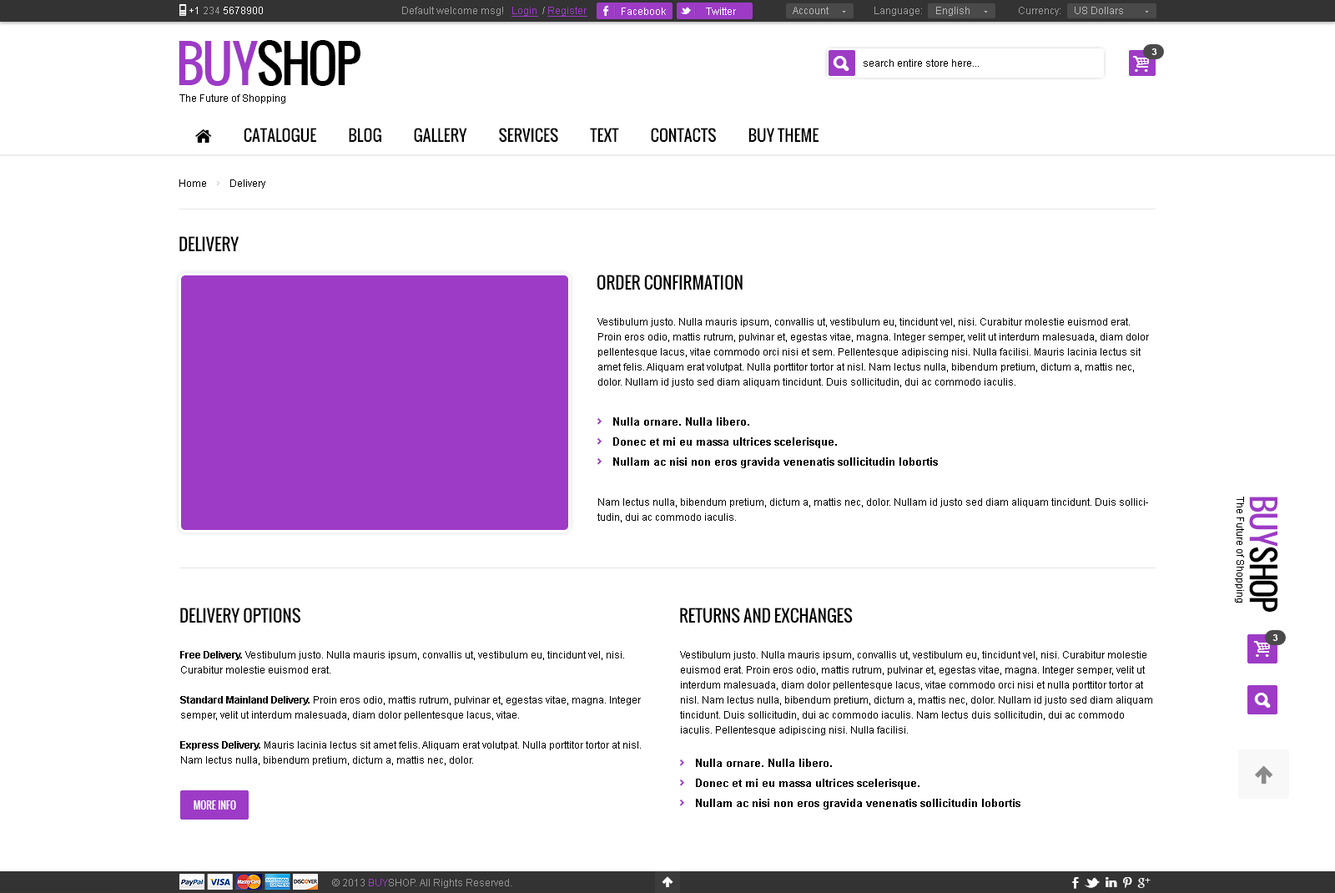
<style>
.page{position:relative;width:1335px;height:893px;background:#ffffff}
.page>*{position:absolute;margin:0}
.t1{font:10px "ArialMT";color:#ffffff}
.t2{font:10px "ArialMT";color:#9b9b9b}
.t3{font:10px "ArialMT";color:#9d3bc6;text-decoration:underline}
.t4{font:10px "ArialMT";color:#b6b6b6}
.t5{font:50.1px "Oswald";letter-spacing:-0.06em;color:#000000;text-transform:uppercase}
.t6{font:50.1px "Oswald";letter-spacing:-0.06em;color:#9d3bc6;text-transform:uppercase}
.t7{font:9.2px "Arial-BoldMT";color:#ffffff;text-transform:uppercase}
.t8{font:10px "ArialMT";color:#000000}
.t9{font:16.7px "Oswald";color:#000000;text-transform:uppercase}
.t10{font:10px/15px "ArialMT";color:#000000}
.t11{font:10.8px/20px "Arial-BoldMT";color:#000000}
.t12{font:31.7px "Oswald";letter-spacing:-0.06em;color:#000000;text-transform:uppercase}
.t13{font:31.7px "Oswald";letter-spacing:-0.06em;color:#9d3bc6;text-transform:uppercase}
.t14{font:10px/15px "Arial-BoldMT";color:#000000}
.t15{font:10px "Oswald";color:#ffffff;text-transform:uppercase}
.t16{font:10px "ArialMT";color:#959595}
.t17{font:10px "ArialMT";color:#9d3bc6}
</style>
<div class="page">
<p class="t1" style="left:189px;top:7px;width:74px;height:7px">+1 <span class="t2">234 </span>5678900</p>
<p class="t2" style="left:402px;top:7px;width:186px;height:10px">Default welcome msg!   <span class="t3">Login </span> / <span class="t3">Register</span></p>
<p class="t2" style="left:402px;top:7px;width:186px;height:10px">Default welcome msg!   <span class="t3">Login </span> / <span class="t3">Register</span></p>
<p class="t1" style="left:622px;top:8px;width:44px;height:7px">Facebook</p>
<p class="t1" style="left:706px;top:8px;width:30px;height:7px">Twitter</p>
<p class="t4" style="left:793px;top:7px;width:36px;height:7px">Account</p>
<p class="t2" style="left:875px;top:7px;width:95px;height:9px">Language:     <span class="t4">English</span></p>
<p class="t4" style="left:1019px;top:7px;width:104px;height:9px"><span class="t2">Currency:     </span>US Dollars</p>
<p class="t5" style="left:179px;top:40px;width:182px;height:46px"><span class="t6">buy</span>shop</p>
<p class="t7" style="left:1152px;top:48px;width:6px;height:7px">3</p>
<p class="t8" style="left:864px;top:59px;width:115px;height:8px">search entire store here...</p>
<p class="t8" style="left:179px;top:94px;width:106px;height:9px">The Future of Shopping</p>
<p class="t8" style="left:179px;top:179px;width:86px;height:10px">Home         Delivery</p>
<p class="t9" style="left:179px;top:236px;width:61px;height:15px">Delivery</p>
<p class="t9" style="left:598px;top:275px;width:145px;height:15px">ORDER CONFIRMATION</p>
<p class="t10" style="left:598px;top:318px;width:551px;height:69px">Vestibulum justo. Nulla mauris ipsum, convallis ut, vestibulum eu, tincidunt vel, nisi. Curabitur molestie euismod erat. Proin eros odio, mattis rutrum, pulvinar et, egestas vitae, magna. Integer semper, velit ut interdum malesuada, diam dolor pellentesque lacus, vitae commodo orci nisi et sem. Pellentesque adipiscing nisi. Nulla facilisi. Mauris lacinia lectus sit amet felis. Aliquam erat volutpat. Nulla porttitor tortor at nisl. Nam lectus nulla, bibendum pretium, dictum a, mattis nec, dolor. Nullam id justo sed diam aliquam tincidunt. Duis sollicitudin, dui ac commodo iaculis.</p>
<p class="t11" style="left:613px;top:417px;width:325px;height:51px">Nulla ornare. Nulla libero. <br>Donec et mi eu massa ultrices scelerisque. <br>Nullam ac nisi non eros gravida venenatis sollicitudin lobortis</p>
<p class="t8" style="left:1235px;top:497px;width:9px;height:106px;rotate:90deg">The Future of Shopping</p>
<p class="t12" style="left:1249px;top:497px;width:30px;height:115px;rotate:90deg"><span class="t13">buy</span>shop</p>
<p class="t10" style="left:598px;top:498px;width:550px;height:24px">Nam lectus nulla, bibendum pretium, dictum a, mattis nec, dolor. Nullam id justo sed diam aliquam tincidunt. Duis sollicitudin, dui ac commodo iaculis.</p>
<p class="t9" style="left:180px;top:608px;width:120px;height:15px">DELIVERY OPTIONS</p>
<p class="t9" style="left:680px;top:608px;width:173px;height:15px">RETURNS AND EXCHANGES</p>
<p class="t7" style="left:1273px;top:634px;width:6px;height:7px">3</p>
<p class="t10" style="left:180px;top:651px;width:461px;height:114px"><span class="t14">Free Delivery. </span>Vestibulum justo. Nulla mauris ipsum, convallis ut, vestibulum eu, tincidunt vel, nisi. Curabitur molestie euismod erat. <br><span class="t14"><br>Standard Mainland Delivery. </span>Proin eros odio, mattis rutrum, pulvinar et, egestas vitae, magna. Integer semper, velit ut interdum malesuada, diam dolor pellentesque lacus, vitae.<br><br><span class="t14">Express Delivery. </span>Mauris lacinia lectus sit amet felis. Aliquam erat volutpat. Nulla porttitor tortor at nisl. Nam lectus nulla, bibendum pretium, dictum a, mattis nec, dolor.</p>
<p class="t10" style="left:680px;top:651px;width:473px;height:84px">Vestibulum justo. Nulla mauris ipsum, convallis ut, vestibulum eu, tincidunt vel, nisi. Curabitur molestie euismod erat. Proin eros odio, mattis rutrum, pulvinar et, egestas vitae, magna. Integer semper, velit ut interdum malesuada, diam dolor pellentesque lacus, vitae commodo orci nisi et nulla porttitor tortor at nisl. Nam lectus nulla, bibendum pretium, dictum a, mattis nec, dolor. Nullam id justo sed diam aliquam tincidunt. Duis sollicitudin, dui ac commodo iaculis. Nam lectus duis sollicitudin, dui ac commodo iaculis. Pellentesque adipiscing nisi. Nulla facilisi.</p>
<p class="t11" style="left:696px;top:759px;width:325px;height:51px">Nulla ornare. Nulla libero. <br>Donec et mi eu massa ultrices scelerisque. <br>Nullam ac nisi non eros gravida venenatis sollicitudin lobortis</p>
<p class="t15" style="left:194px;top:800px;width:42px;height:10px">more info</p>
<p class="t16" style="left:332px;top:879px;width:180px;height:9px">© 2013 <span class="t17">BUY</span>SHOP. All Rights Reserved.</p>
</div>
